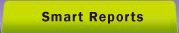
<style>
.page{position:relative;width:179px;height:33px}
.page>*{position:absolute;margin:0}
.t1{font:14px "FranklinGothic-Demi";letter-spacing:0.075em;color:#211351}
</style>
<div class="page">
<p class="t1" style="left:41px;top:11px;width:102px;height:13px">Smart Reports</p>
</div>
